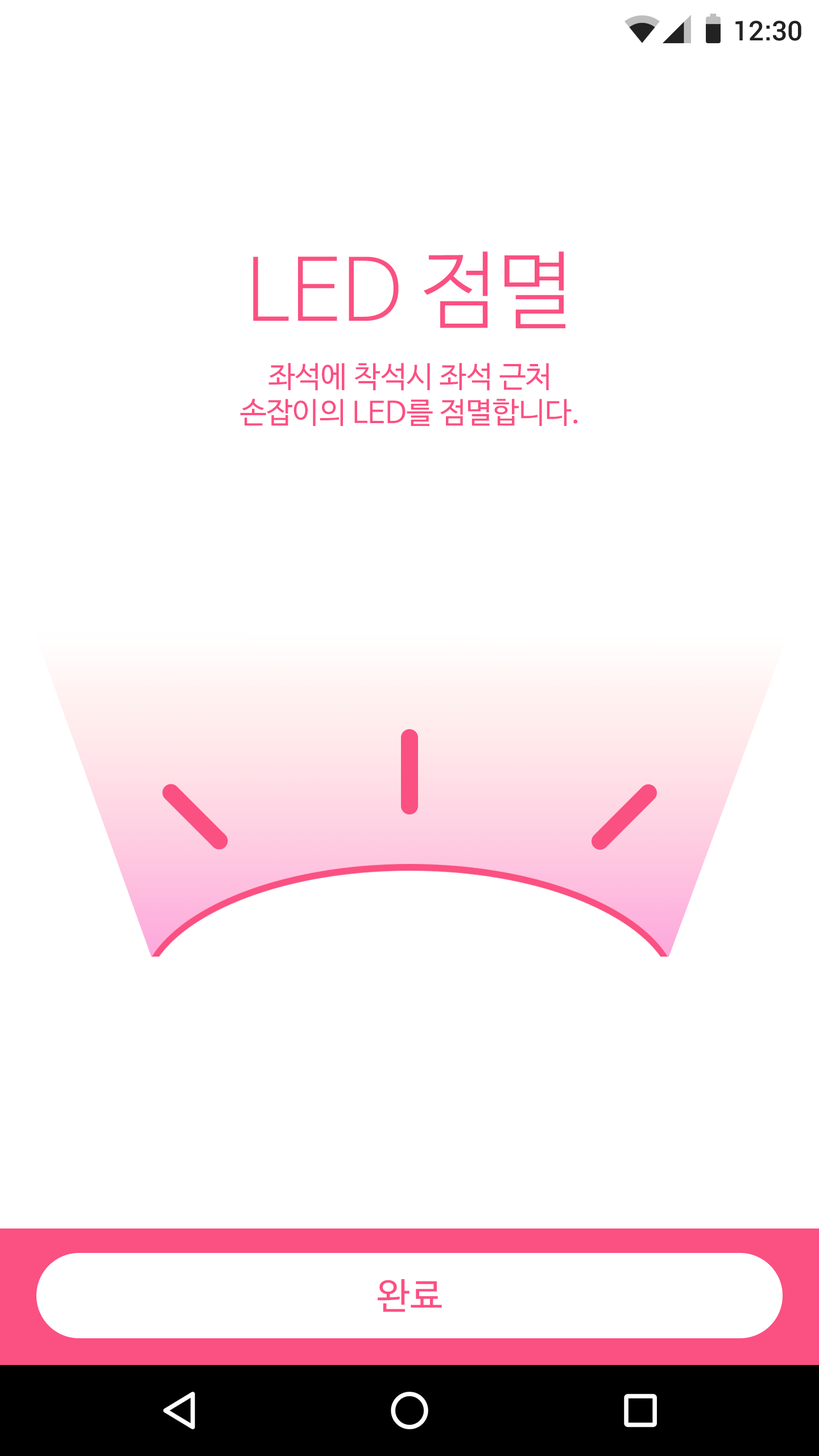
<style>
.page{position:relative;width:819px;height:1456px;background:#ffffff}
.page>*{position:absolute;margin:0}
.t1{font:27.3px "Roboto-Medium";color:#222222}
.t2{font:85.3px "NanumBarunGothicLight";color:#fb5082}
.t3{font:29.6px "NanumBarunGothic";color:#fb5082}
.t4{font:36.4px "NanumBarunGothic";color:#fb5082}
</style>
<div class="page">
<p class="t1" style="left:735px;top:20px;width:66px;height:21px">12:30</p>
<p class="t2" style="left:253px;top:251px;width:313px;height:78px">LED 점멸</p>
<p class="t3" style="left:240px;top:363px;width:338px;height:63px;text-align:center">좌석에 착석시 좌석 근처<br>손잡이의 LED를 점멸합니다.</p>
<p class="t4" style="left:378px;top:1279px;width:64px;height:33px">완료</p>
</div>
